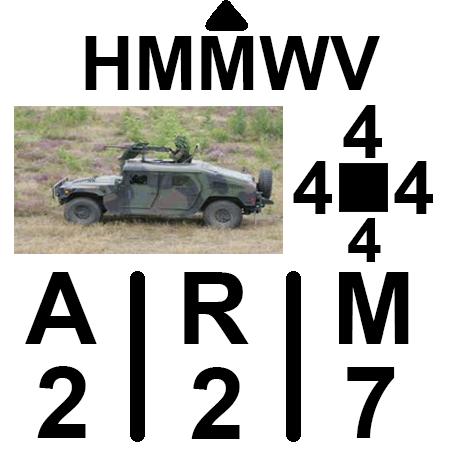
<style>
.page{position:relative;width:450px;height:450px;background:#ffffff}
.page>*{position:absolute;margin:0}
.t1{font:75px "Arial-BoldMT";color:#000000}
.t2{font:62.5px "Arial-BoldMT";color:#000000}
.t3{font:100px "Arial-BoldMT";color:#000000}
</style>
<div class="page">
<p class="t1" style="left:85px;top:36px;width:295px;height:54px">HMMWV</p>
<p class="t1" style="left:343px;top:105px;width:39px;height:53px">4</p>
<p class="t1" style="left:293px;top:161px;width:39px;height:53px">4</p>
<p class="t1" style="left:394px;top:161px;width:39px;height:53px">4</p>
<p class="t2" style="left:348px;top:218px;width:33px;height:44px">4</p>
<p class="t3" style="left:25px;top:272px;width:384px;height:72px">A   R   M</p>
<p class="t3" style="left:37px;top:366px;width:49px;height:72px">2</p>
<p class="t3" style="left:191px;top:367px;width:49px;height:72px">2</p>
<p class="t3" style="left:347px;top:367px;width:48px;height:71px">7</p>
</div>
